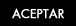
<style>
.page{position:relative;width:76px;height:26px;background:#000000}
.page>*{position:absolute;margin:0}
.t1{font:12px "FuturaLT-Book";color:#ffffff;font-weight:bold}
</style>
<div class="page">
<p class="t1" style="left:12px;top:8px;width:53px;height:11px">ACEPTAR</p>
</div>
